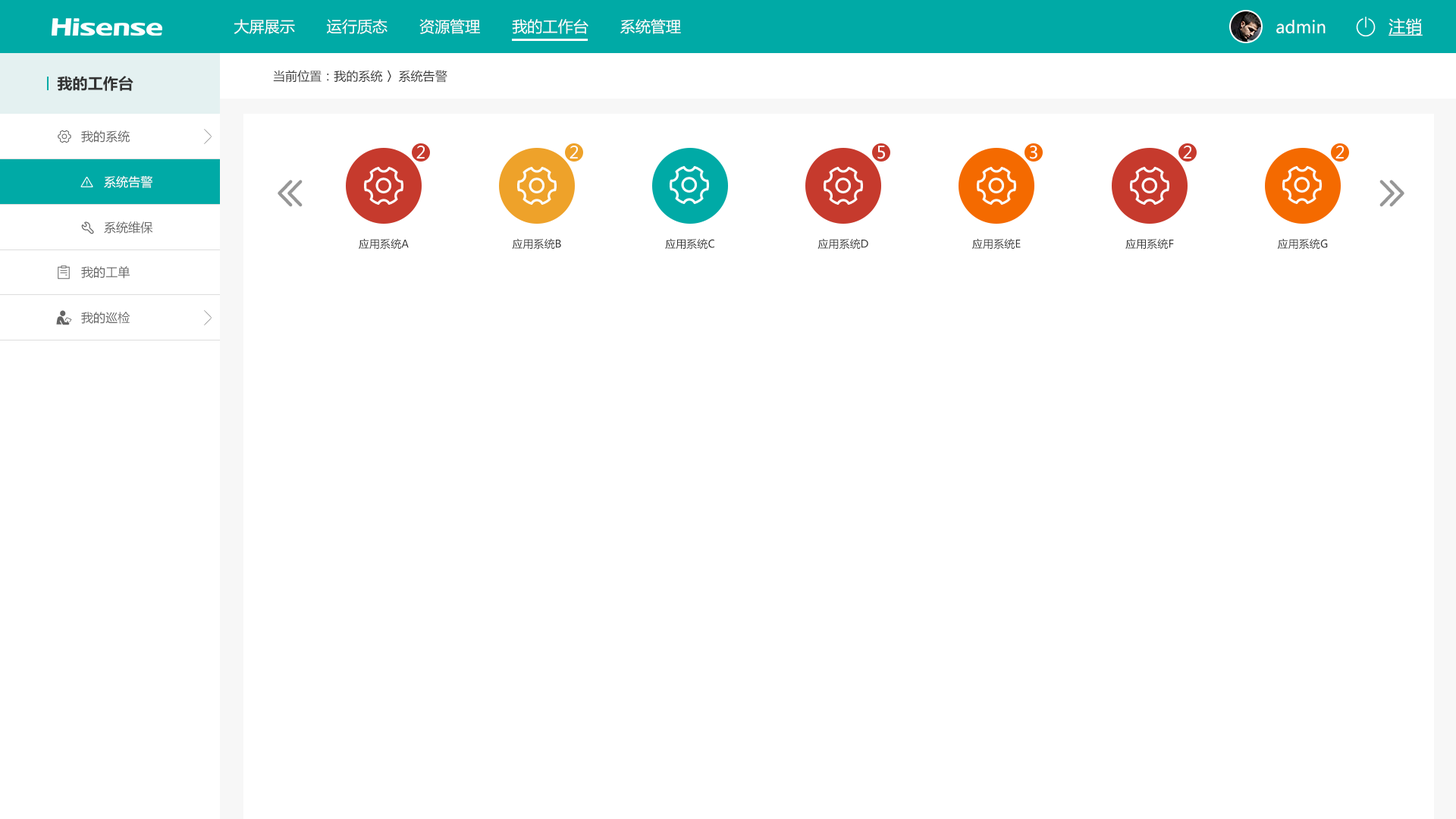
<style>
.page{position:relative;width:1456px;height:819px;background:#ffffff}
.page>*{position:absolute;margin:0}
.t1{font:15.2px "MicrosoftYaHei";letter-spacing:0.004em;color:#ffffff}
.t2{font:16.7px "MicrosoftYaHei";letter-spacing:0.004em;color:#ffffff}
.t3{font:16.7px "MicrosoftYaHei";letter-spacing:0.004em;color:#ffffff;text-decoration:underline}
.t4{font:15.2px "MicrosoftYaHei-Bold";letter-spacing:0.004em;color:#333333}
.t5{font:12.1px "MicrosoftYaHei";letter-spacing:0.004em;color:#333333}
.t6{font:12.1px "MicrosoftYaHei";letter-spacing:0.004em;color:#666666}
.t7{font:12.1px "MicrosoftYaHei";letter-spacing:0.004em;color:#ffffff}
.t8{font:10.6px "MicrosoftYaHei";letter-spacing:0.004em;color:#333333}
</style>
<div class="page">
<p class="t1" style="left:234px;top:19px;width:447px;height:15px">大屏展示       运行质态       资源管理       我的工作台       系统管理</p>
<p class="t2" style="left:1276px;top:20px;width:50px;height:13px">admin</p>
<p class="t3" style="left:1388px;top:18px;width:35px;height:18px">注销</p>
<p class="t4" style="left:57px;top:76px;width:76px;height:15px">我的工作台</p>
<p class="t5" style="left:273px;top:70px;width:174px;height:13px">当前位置：我的系统 〉系统告警</p>
<p class="t6" style="left:81px;top:130px;width:49px;height:13px">我的系统</p>
<p class="t2" style="left:416px;top:146px;width:9px;height:12px">2</p>
<p class="t2" style="left:570px;top:146px;width:8px;height:12px">2</p>
<p class="t2" style="left:877px;top:146px;width:8px;height:13px">5</p>
<p class="t2" style="left:1030px;top:146px;width:7px;height:13px">3</p>
<p class="t2" style="left:1183px;top:146px;width:8px;height:12px">2</p>
<p class="t2" style="left:1335px;top:146px;width:9px;height:12px">2</p>
<p class="t7" style="left:104px;top:176px;width:48px;height:12px">系统告警</p>
<p class="t6" style="left:104px;top:221px;width:49px;height:13px">系统维保</p>
<p class="t8" style="left:359px;top:238px;width:50px;height:11px">应用系统A</p>
<p class="t8" style="left:512px;top:238px;width:49px;height:11px">应用系统B</p>
<p class="t8" style="left:665px;top:238px;width:49px;height:11px">应用系统C</p>
<p class="t8" style="left:817px;top:238px;width:51px;height:11px">应用系统D</p>
<p class="t8" style="left:972px;top:238px;width:49px;height:11px">应用系统E</p>
<p class="t8" style="left:1125px;top:238px;width:49px;height:11px">应用系统F</p>
<p class="t8" style="left:1277px;top:238px;width:51px;height:11px">应用系统G</p>
<p class="t6" style="left:81px;top:266px;width:49px;height:12px">我的工单</p>
<p class="t6" style="left:81px;top:312px;width:49px;height:12px">我的巡检</p>
</div>
